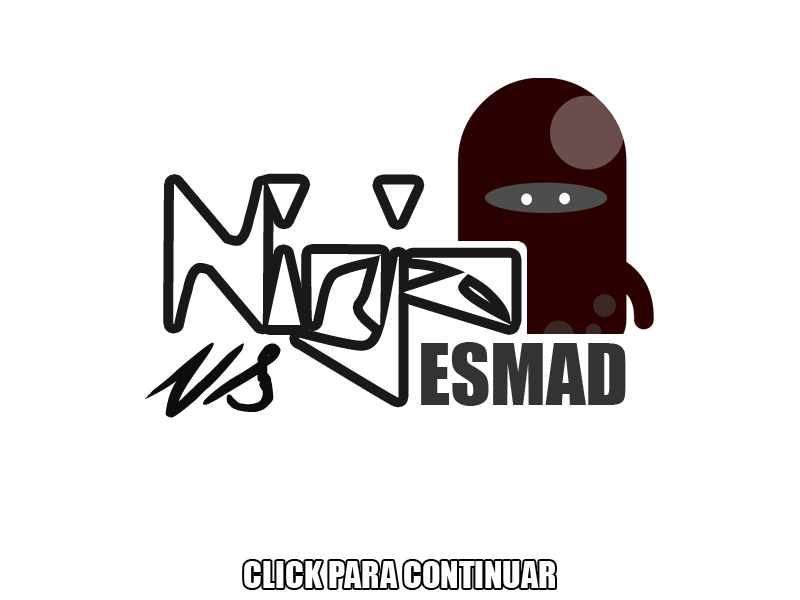
<style>
.page{position:relative;width:800px;height:600px;background:#ffffff}
.page>*{position:absolute;margin:0}
.t1{font:215.4px "DigitalNinja";color:#ffffff}
.t2{font:270.8px "asilaydying";color:#000000}
.t3{font:77.5px "Impact";color:#333333}
.t4{font:34px "Impact";color:#ffffff}
</style>
<div class="page">
<p class="t1" style="left:173px;top:183px;width:339px;height:215px">Ninja</p>
<p class="t2" style="left:145px;top:342px;width:136px;height:76px;opacity:0.95">vs</p>
<p class="t3" style="left:421px;top:342px;width:205px;height:64px">ESMAD</p>
<p class="t4" style="left:244px;top:561px;width:311px;height:27px">CLICK PARA CONTINUAR</p>
</div>
